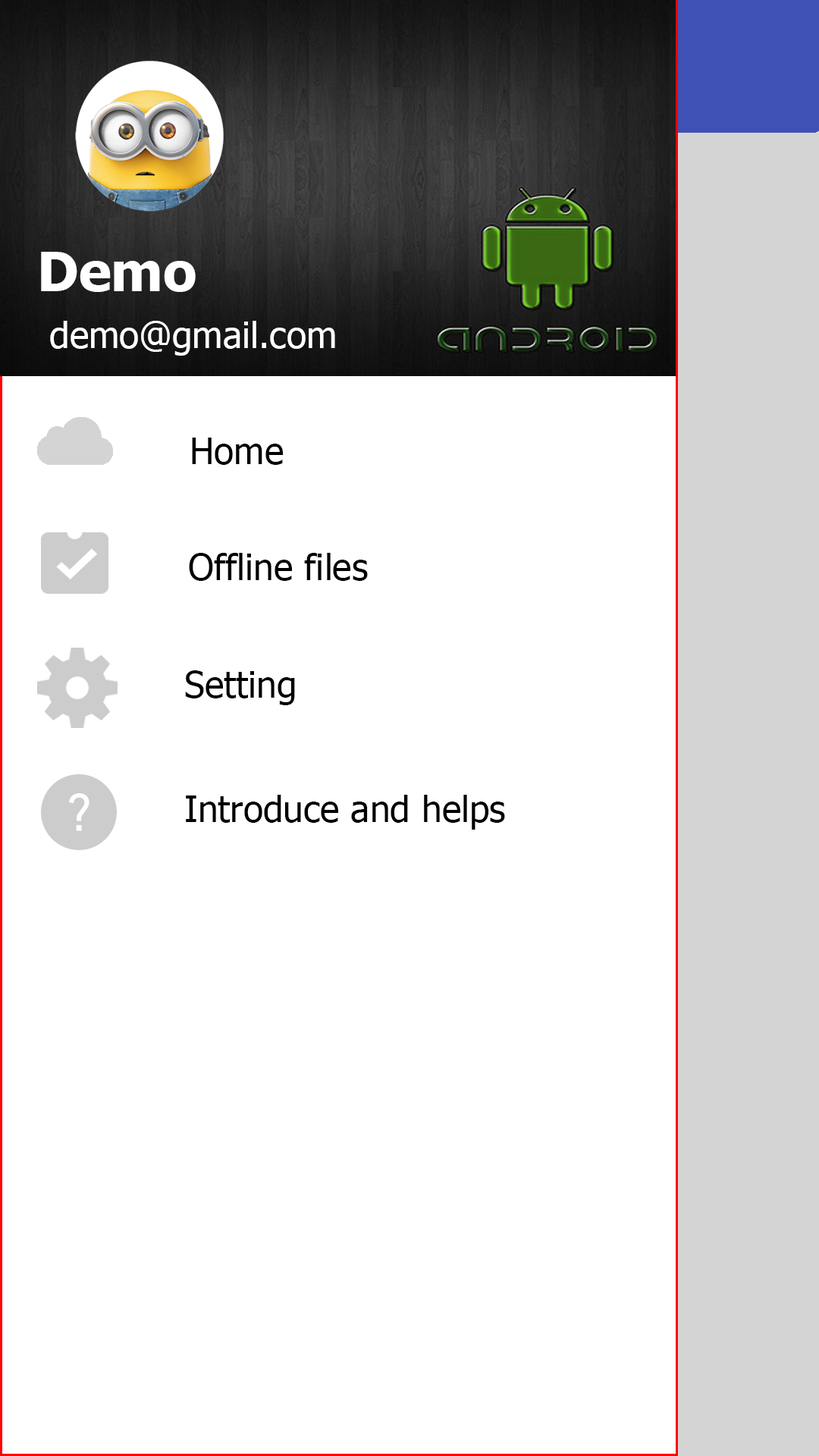
<style>
.page{position:relative;width:819px;height:1456px;background:#ffffff}
.page>*{position:absolute;margin:0}
.t1{font:54.6px "Tahoma-Bold";color:#ffffff}
.t2{font:36.4px "Tahoma";color:#ffffff}
.t3{font:36.4px "Tahoma";color:#000000}
</style>
<div class="page">
<p class="t1" style="left:41px;top:252px;width:155px;height:40px">Demo</p>
<p class="t2" style="left:50px;top:321px;width:285px;height:35px">demo@gmail.com</p>
<p class="t3" style="left:192px;top:438px;width:91px;height:27px">Home</p>
<p class="t3" style="left:189px;top:553px;width:179px;height:28px">Offline files</p>
<p class="t3" style="left:185px;top:670px;width:110px;height:35px">Setting</p>
<p class="t3" style="left:186px;top:795px;width:319px;height:35px">Introduce and helps</p>
</div>
